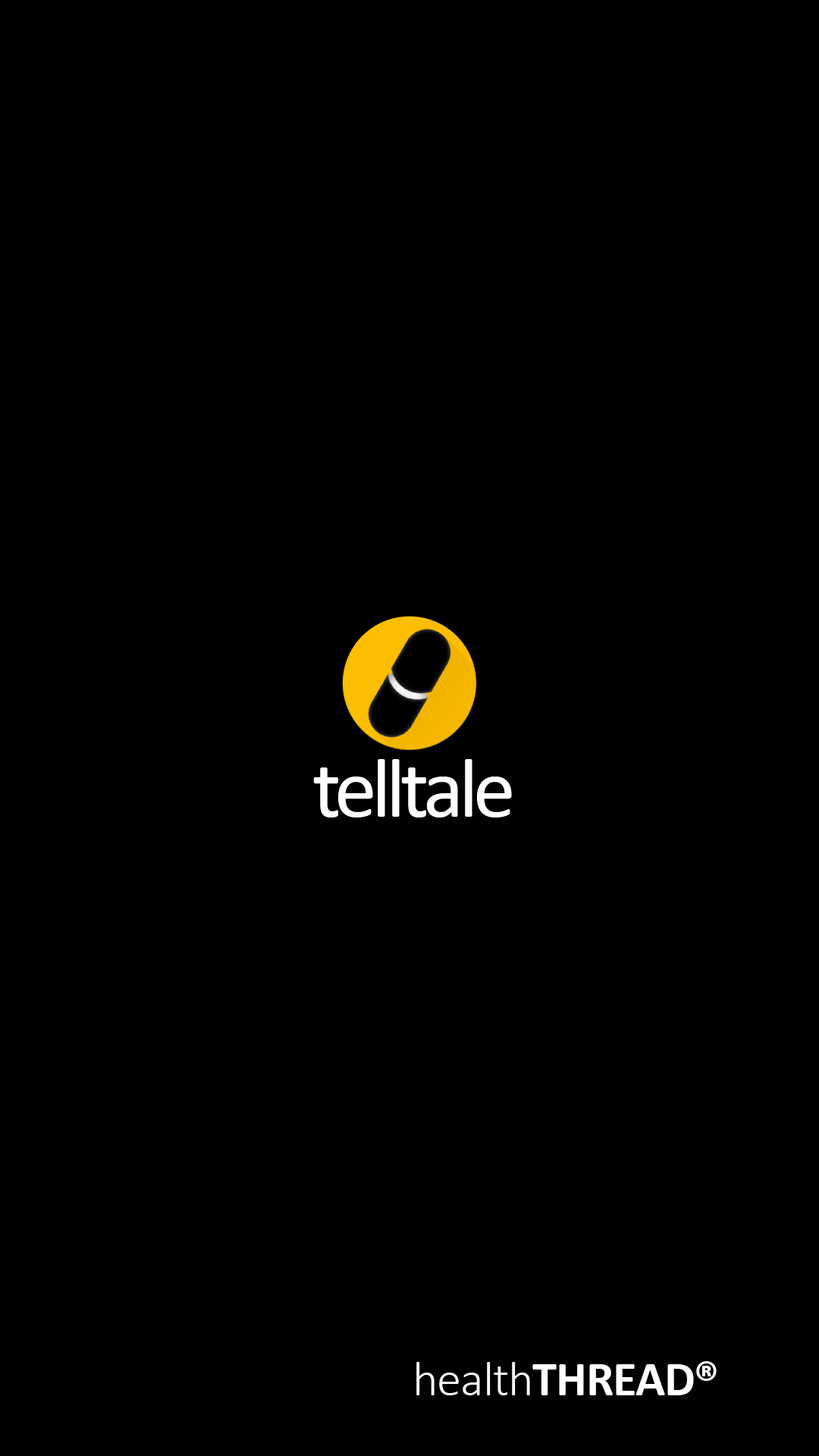
<style>
.page{position:relative;width:819px;height:1456px;background:#000000}
.page>*{position:absolute;margin:0}
.t1{font:84.9px "Calibri";letter-spacing:-0.06em;color:#ffffff}
.t2{font:49.3px "Calibri-Bold";letter-spacing:-0.02em;color:#ffffff}
.t3{font:49.3px "Calibri-Light";letter-spacing:-0.02em;color:#ffffff}
</style>
<div class="page">
<p class="t1" style="left:313px;top:759px;width:199px;height:58px">telltale</p>
<p class="t2" style="left:416px;top:1361px;width:301px;height:34px"><span class="t3">health</span>THREAD®</p>
</div>
